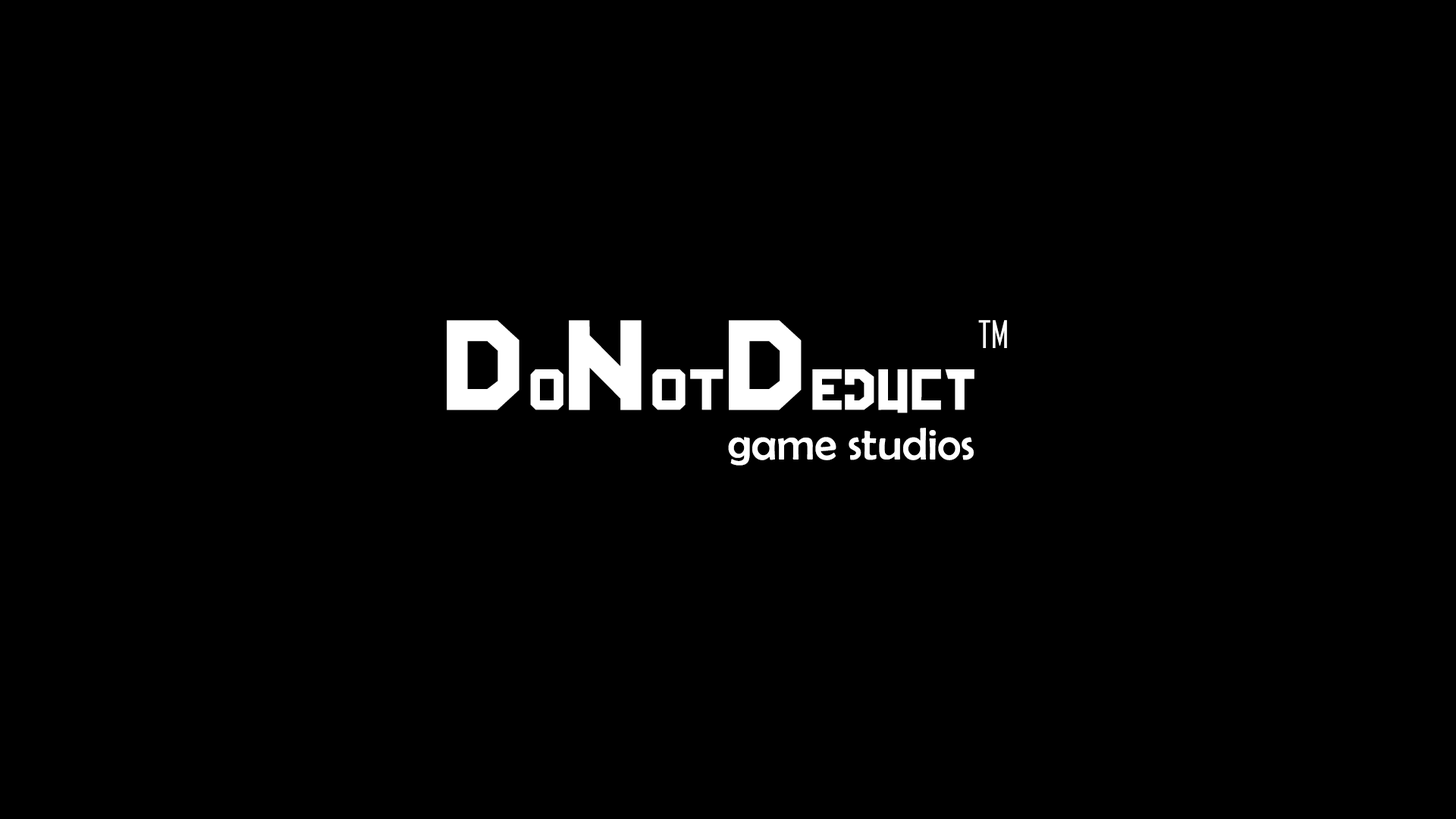
<style>
.page{position:relative;width:1456px;height:819px;background:#000000}
.page>*{position:absolute;margin:0}
.t1{font:54.6px "BackInTheUSSRDL-Black";color:#ffffff}
.t2{font:121.3px "BackInTheUSSRDL-Black";color:#ffffff}
.t3{font:36.4px "AgencyFB-Reg";color:#ffffff}
.t4{font:45.5px "BerlinSansFB-Reg";color:#ffffff}
</style>
<div class="page">
<p class="t1" style="left:447px;top:320px;width:527px;height:93px"><span class="t2">D</span>O<span class="t2">N</span>OT<span class="t2">D</span>educt</p>
<p class="t3" style="left:978px;top:320px;width:29px;height:28px">TM</p>
<p class="t4" style="left:728px;top:428px;width:246px;height:38px">game studios</p>
</div>
